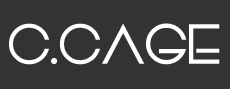
<style>
.page{position:relative;width:230px;height:89px;background:#333333}
.page>*{position:absolute;margin:0}
.t1{font:54.2px "Vonique64-Bold";letter-spacing:0.02em;color:#ffffff}
</style>
<div class="page">
<p class="t1" style="left:9px;top:23px;width:211px;height:42px">C.CAGE</p>
</div>
